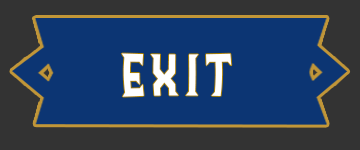
<style>
.page{position:relative;width:360px;height:150px;background:#0c3573}
.page>*{position:absolute;margin:0}
.t1{font:62.5px "Lorde-Havana";letter-spacing:0.1em;color:#ffffff;scale:0.75 1}
</style>
<div class="page">
<p class="t1" style="left:121px;top:53px;width:111px;height:44px">Exit</p>
</div>
